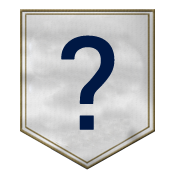
<style>
.page{position:relative;width:175px;height:175px;background:#ffffff}
.page>*{position:absolute;margin:0}
.t1{font:129px "Roboto-Regular";letter-spacing:-0.1em;color:#001844;font-weight:bold}
</style>
<div class="page">
<p class="t1" style="left:61px;top:35px;width:54px;height:95px">?</p>
</div>
